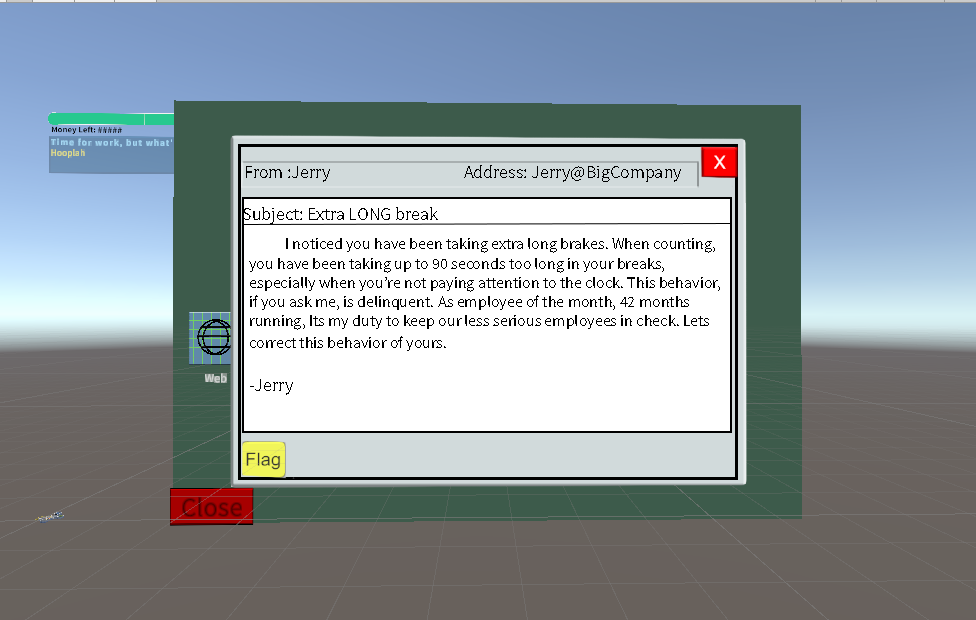
<style>
.page{position:relative;width:976px;height:620px}
.page>*{position:absolute;margin:0}
.t1{font:18px "SourceSansRoman-Regular";color:#000000}
.t2{font:16px "SourceSansRoman-Regular";color:#000000}
</style>
<div class="page">
<p class="t1" style="left:246px;top:165px;width:435px;height:17px">From :Jerry                                     Address: Jerry@BigCompany</p>
<p class="t1" style="left:243px;top:207px;width:195px;height:17px">Subject: Extra LONG break</p>
<p class="t2" style="left:249px;top:238px;width:471px;height:157px">I noticed you have been taking extra long brakes. When counting, you have been taking up to 90 seconds too long in your breaks, especially when you’re not paying attention to the clock. This behavior, if you ask me, is delinquent. As employee of the month, 42 months running, Its my duty to keep our less serious employees in check. Lets correct this behavior of yours.<span class="t1"> <br><br>-Jerry</span></p>
</div>
